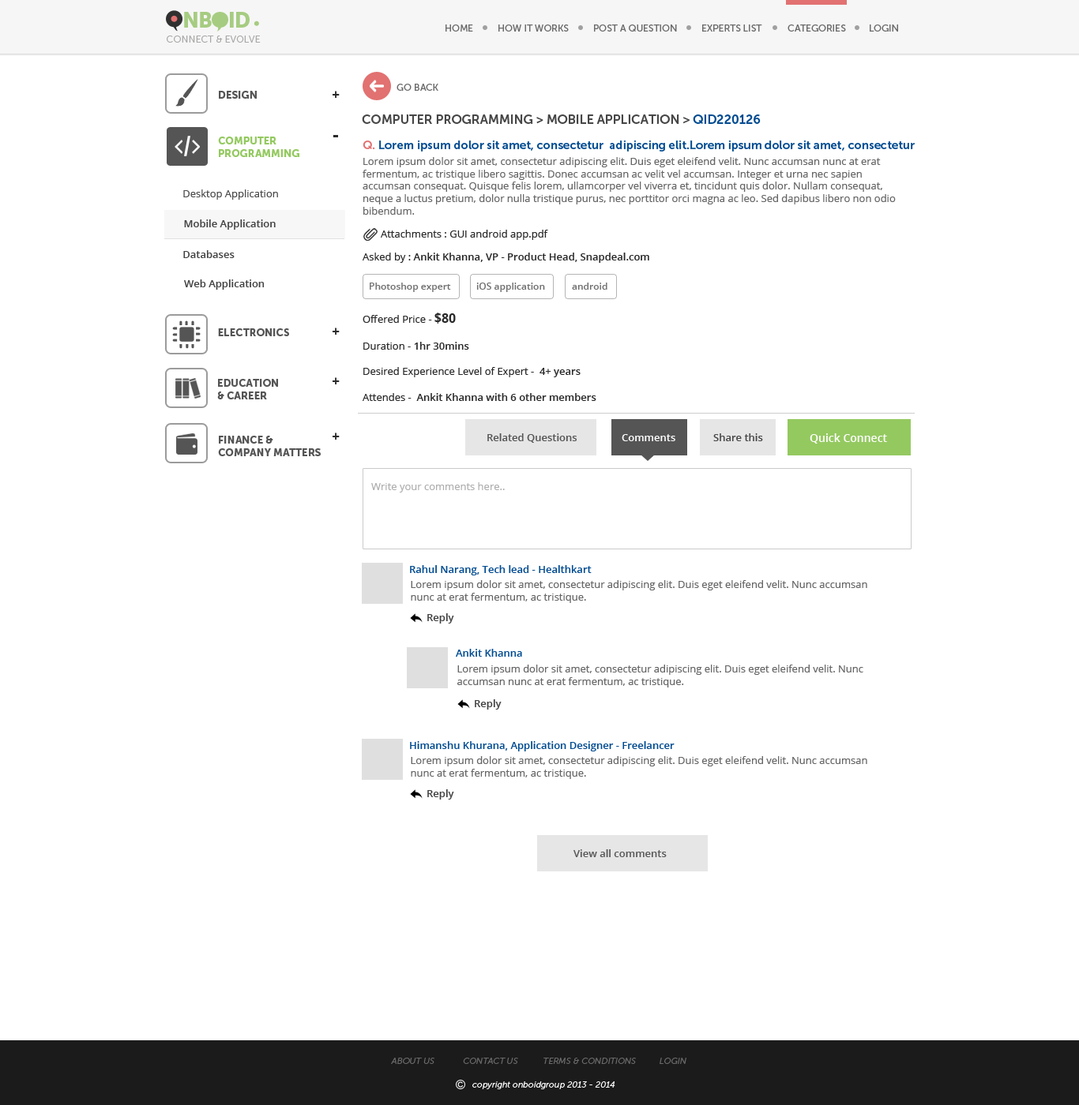
<style>
.page{position:relative;width:1079px;height:1105px;background:#ffffff}
.page>*{position:absolute;margin:0}
.t1{font:21.3px "MuseoSans-900";letter-spacing:-0.04em;color:#a6cc81;text-transform:uppercase}
.t2{font:9.5px "MuseoSans-500";color:#6a6a6a;text-transform:uppercase}
.t3{font:9.5px "MuseoSans-300";color:#a8a8a7;text-transform:uppercase}
.t4{font:10.3px "MuseoSans-900";color:#565555;text-transform:uppercase}
.t5{font:13.4px "OpenSans-Bold";color:#2a2a2a}
.t6{font:12.6px "MuseoSans-700";color:#464646;text-transform:uppercase}
.t7{font:12.6px "MuseoSans-700";color:#004b91;text-transform:uppercase}
.t8{font:10.3px "MuseoSans-900";color:#94c960;text-transform:uppercase}
.t9{font:18.2px "OpenSans-Bold";color:#2a2a2a}
.t10{font:11.8px "MuseoSans-700";color:#004b91}
.t11{font:11.8px "MuseoSans-700";color:#e27171}
.t12{font:10.3px "OpenSans";color:#666666}
.t13{font:10.3px "OpenSans";color:#4b4b4b}
.t14{font:10.3px "OpenSans-Semibold";color:#444343}
.t15{font:10.3px "OpenSans";color:#2a2a2a}
.t16{font:10.3px "OpenSans-Semibold";color:#434343}
.t17{font:10.3px "OpenSans-Semibold";color:#2a2a2a}
.t18{font:9.5px "OpenSans-Semibold";color:#707070}
.t19{font:12.6px "OpenSans-Bold";color:#2a2a2a}
.t20{font:10.3px "OpenSans-Semibold";color:#565555}
.t21{font:10.3px "OpenSans-Semibold";color:#ffffff}
.t22{font:10.3px "OpenSans-Semibold";color:#484848}
.t23{font:11.1px "OpenSans-Semibold";color:#ffffff}
.t24{font:10.3px "OpenSans";color:#afafaf}
.t25{font:10.3px "OpenSans-Semibold";color:#004b91}
.t26{font:10.3px "OpenSans-Semibold";color:#404040}
.t27{font:10.3px "OpenSans-Semibold";color:#595959}
.t28{font:8.7px "MuseoSans-300Italic";color:#6a6a6a;text-transform:uppercase}
.t29{font:8.7px "MuseoSans-300Italic";color:#ffffff}
</style>
<div class="page">
<p class="t1" style="left:184px;top:12px;width:66px;height:16px">nboid</p>
<p class="t2" style="left:445px;top:24px;width:28px;height:8px">home</p>
<p class="t2" style="left:498px;top:24px;width:71px;height:8px">how it works</p>
<p class="t2" style="left:594px;top:24px;width:83px;height:8px">Post a Question</p>
<p class="t2" style="left:702px;top:24px;width:60px;height:8px">experts list</p>
<p class="t2" style="left:787px;top:24px;width:59px;height:8px">categories</p>
<p class="t2" style="left:869px;top:24px;width:29px;height:8px">login</p>
<p class="t3" style="left:167px;top:36px;width:94px;height:7px">Connect &amp; evolve</p>
<p class="t2" style="left:396px;top:84px;width:42px;height:7px">go back</p>
<p class="t4" style="left:219px;top:91px;width:38px;height:8px">Design</p>
<p class="t5" style="left:332px;top:91px;width:8px;height:7px">+</p>
<p class="t6" style="left:362px;top:114px;width:398px;height:10px">computer programming &gt; mobile application &gt; <span class="t7">QID220126</span></p>
<p class="t8" style="left:218px;top:137px;width:81px;height:20px">computer <br>programming</p>
<p class="t9" style="left:332px;top:135px;width:6px;height:2px">-</p>
<p class="t10" style="left:362px;top:141px;width:552px;height:11px"><span class="t11">Q.</span> Lorem ipsum dolor sit amet, consectetur  adipiscing elit.Lorem ipsum dolor sit amet, consectetur</p>
<p class="t12" style="left:362px;top:157px;width:533px;height:58px">Lorem ipsum dolor sit amet, consectetur adipiscing elit. Duis eget eleifend velit. Nunc accumsan nunc at erat fermentum, ac tristique libero sagittis. Donec accumsan ac velit vel accumsan. Integer et urna nec sapien accumsan consequat. Quisque felis lorem, ullamcorper vel viverra et, tincidunt quis dolor. Nullam consequat, neque a luctus pretium, dolor nulla tristique purus, nec porttitor orci magna ac leo. Sed dapibus libero non odio bibendum.</p>
<p class="t13" style="left:183px;top:190px;width:95px;height:10px">Desktop Application</p>
<p class="t14" style="left:184px;top:220px;width:92px;height:10px">Mobile Application</p>
<p class="t15" style="left:381px;top:230px;width:167px;height:10px">Attachments : GUI android app.pdf</p>
<p class="t16" style="left:183px;top:250px;width:52px;height:8px">Databases</p>
<p class="t17" style="left:362px;top:253px;width:287px;height:10px"><span class="t15">Asked by : </span>Ankit Khanna, VP - Product Head, Snapdeal.com</p>
<p class="t16" style="left:184px;top:280px;width:81px;height:10px">Web Application</p>
<p class="t18" style="left:370px;top:283px;width:81px;height:9px">Photoshop expert</p>
<p class="t18" style="left:476px;top:283px;width:69px;height:9px">iOS application</p>
<p class="t18" style="left:572px;top:283px;width:35px;height:7px">android</p>
<p class="t15" style="left:362px;top:313px;width:94px;height:11px">Offered Price - <span class="t19">$80</span></p>
<p class="t4" style="left:218px;top:328px;width:71px;height:8px">electronics</p>
<p class="t5" style="left:332px;top:328px;width:8px;height:7px">+</p>
<p class="t15" style="left:363px;top:342px;width:106px;height:8px">Duration - <span class="t17">1hr 30mins</span></p>
<p class="t5" style="left:332px;top:377px;width:8px;height:8px">+</p>
<p class="t15" style="left:363px;top:367px;width:217px;height:10px">Desired Experience Level of Expert -  <span class="t17">4+ years</span></p>
<p class="t4" style="left:217px;top:379px;width:61px;height:21px">education<br>&amp; career</p>
<p class="t17" style="left:362px;top:393px;width:234px;height:8px"><span class="t15">Attendes -  </span>Ankit Khanna with 6 other members</p>
<p class="t4" style="left:218px;top:436px;width:103px;height:20px">Finance &amp;<br>Company MAtters</p>
<p class="t5" style="left:332px;top:433px;width:8px;height:7px">+</p>
<p class="t20" style="left:487px;top:434px;width:89px;height:9px">Related Questions</p>
<p class="t21" style="left:621px;top:434px;width:54px;height:7px">Comments</p>
<p class="t22" style="left:713px;top:434px;width:50px;height:7px">Share this</p>
<p class="t23" style="left:809px;top:434px;width:78px;height:10px">Quick Connect</p>
<p class="t24" style="left:371px;top:482px;width:134px;height:11px">Write your comments here..</p>
<p class="t25" style="left:410px;top:565px;width:181px;height:11px">Rahul Narang, Tech lead - Healthkart</p>
<p class="t12" style="left:411px;top:580px;width:456px;height:23px">Lorem ipsum dolor sit amet, consectetur adipiscing elit. Duis eget eleifend velit. Nunc accumsan nunc at erat fermentum, ac tristique.</p>
<p class="t26" style="left:427px;top:614px;width:27px;height:10px">Reply</p>
<p class="t25" style="left:456px;top:649px;width:66px;height:8px">Ankit Khanna</p>
<p class="t12" style="left:457px;top:665px;width:406px;height:23px">Lorem ipsum dolor sit amet, consectetur adipiscing elit. Duis eget eleifend velit. Nunc accumsan nunc at erat fermentum, ac tristique.</p>
<p class="t26" style="left:475px;top:700px;width:26px;height:10px">Reply</p>
<p class="t25" style="left:410px;top:741px;width:264px;height:11px">Himanshu Khurana, Application Designer - Freelancer</p>
<p class="t12" style="left:411px;top:756px;width:456px;height:23px">Lorem ipsum dolor sit amet, consectetur adipiscing elit. Duis eget eleifend velit. Nunc accumsan nunc at erat fermentum, ac tristique.</p>
<p class="t26" style="left:427px;top:790px;width:27px;height:10px">Reply</p>
<p class="t27" style="left:573px;top:850px;width:93px;height:8px">View all comments</p>
<p class="t28" style="left:391px;top:1058px;width:295px;height:6px">About us       COntact us     Terms &amp; conditions          Login</p>
<p class="t29" style="left:472px;top:1082px;width:143px;height:8px">copyright onboidgroup 2013 - 2014</p>
</div>
